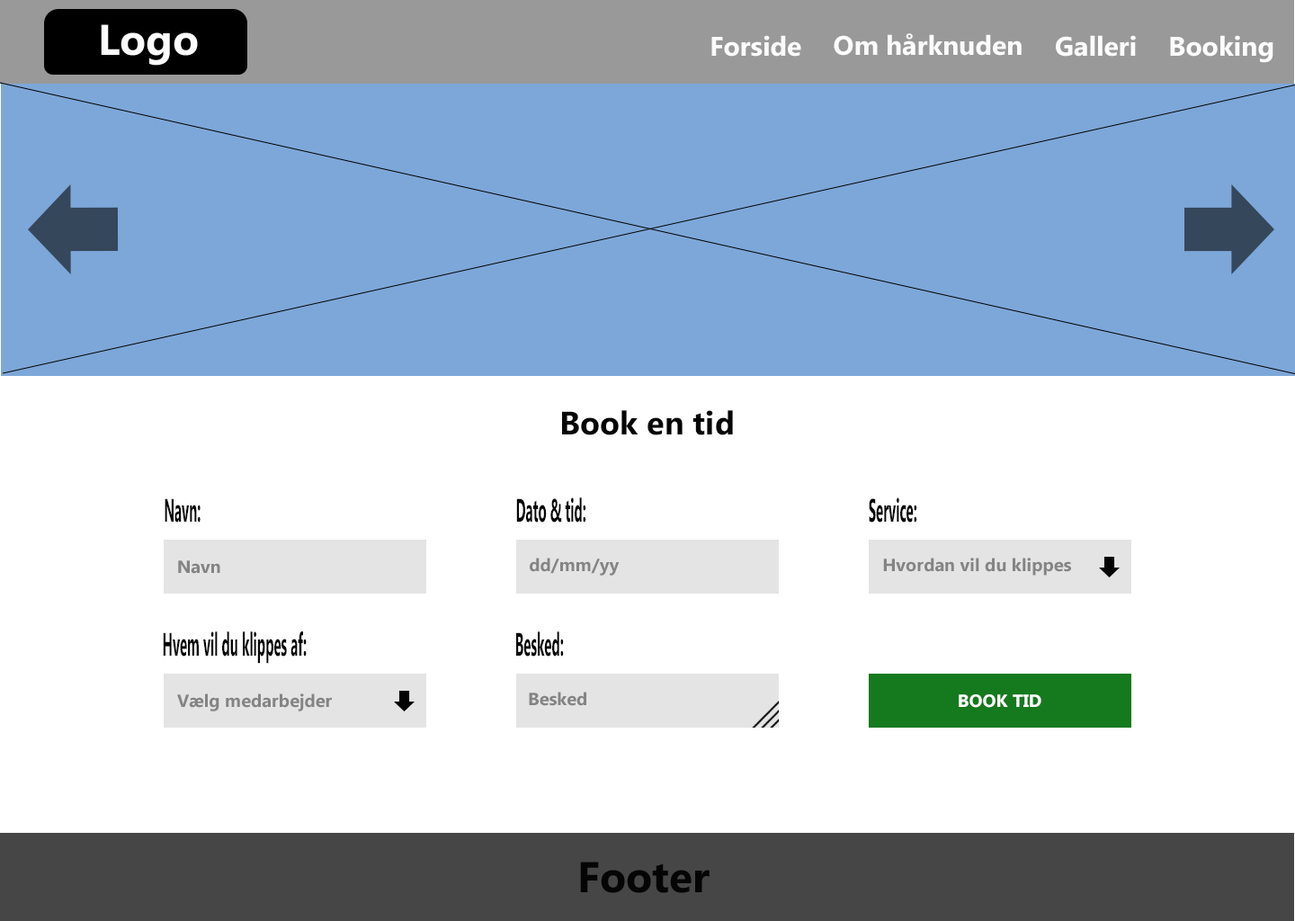
<style>
.page{position:relative;width:1295px;height:921px;background:#ffffff}
.page>*{position:absolute;margin:0}
.t1{font:43.2px "Ebrima-Bold";color:#fdfcfc}
.t2{font:27px "Ebrima-Bold";color:#fdfcfc}
.t3{font:32.4px "Ebrima-Bold";color:#050505}
.t4{font:32.4px "Ebrima-Bold";color:#050505;scale:0.41 1}
.t5{font:17.8px "Ebrima-Bold";color:#848484}
.t6{font:17.8px "Ebrima-Bold";color:#ffffff}
.t7{font:43.2px "Ebrima-Bold";color:#050505}
</style>
<div class="page">
<p class="t1" style="left:101px;top:24px;width:97px;height:42px">Logo</p>
<p class="t2" style="left:711px;top:35px;width:90px;height:22px">Forside</p>
<p class="t2" style="left:834px;top:33px;width:188px;height:23px">Om hårknuden</p>
<p class="t2" style="left:1056px;top:35px;width:80px;height:22px">Galleri</p>
<p class="t2" style="left:1170px;top:35px;width:103px;height:28px">Booking</p>
<p class="t3" style="left:562px;top:410px;width:171px;height:25px">Book en tid</p>
<p class="t4" style="left:516px;top:497px;width:70px;height:25px">Dato &amp; tid:</p>
<p class="t4" style="left:869px;top:497px;width:48px;height:25px">Service:</p>
<p class="t4" style="left:165px;top:498px;width:36px;height:24px">Navn:</p>
<p class="t5" style="left:530px;top:558px;width:90px;height:18px">dd/mm/yy</p>
<p class="t5" style="left:883px;top:558px;width:188px;height:18px">Hvordan vil du klippes</p>
<p class="t5" style="left:178px;top:560px;width:42px;height:14px">Navn</p>
<p class="t4" style="left:163px;top:631px;width:144px;height:33px">Hvem vil du klippes af:</p>
<p class="t4" style="left:516px;top:631px;width:48px;height:25px">Besked:</p>
<p class="t5" style="left:177px;top:693px;width:155px;height:18px">Vælg medarbejder</p>
<p class="t5" style="left:529px;top:692px;width:57px;height:14px">Besked</p>
<p class="t6" style="left:959px;top:694px;width:82px;height:14px">BOOK TID</p>
<p class="t7" style="left:580px;top:861px;width:130px;height:32px">Footer</p>
</div>
